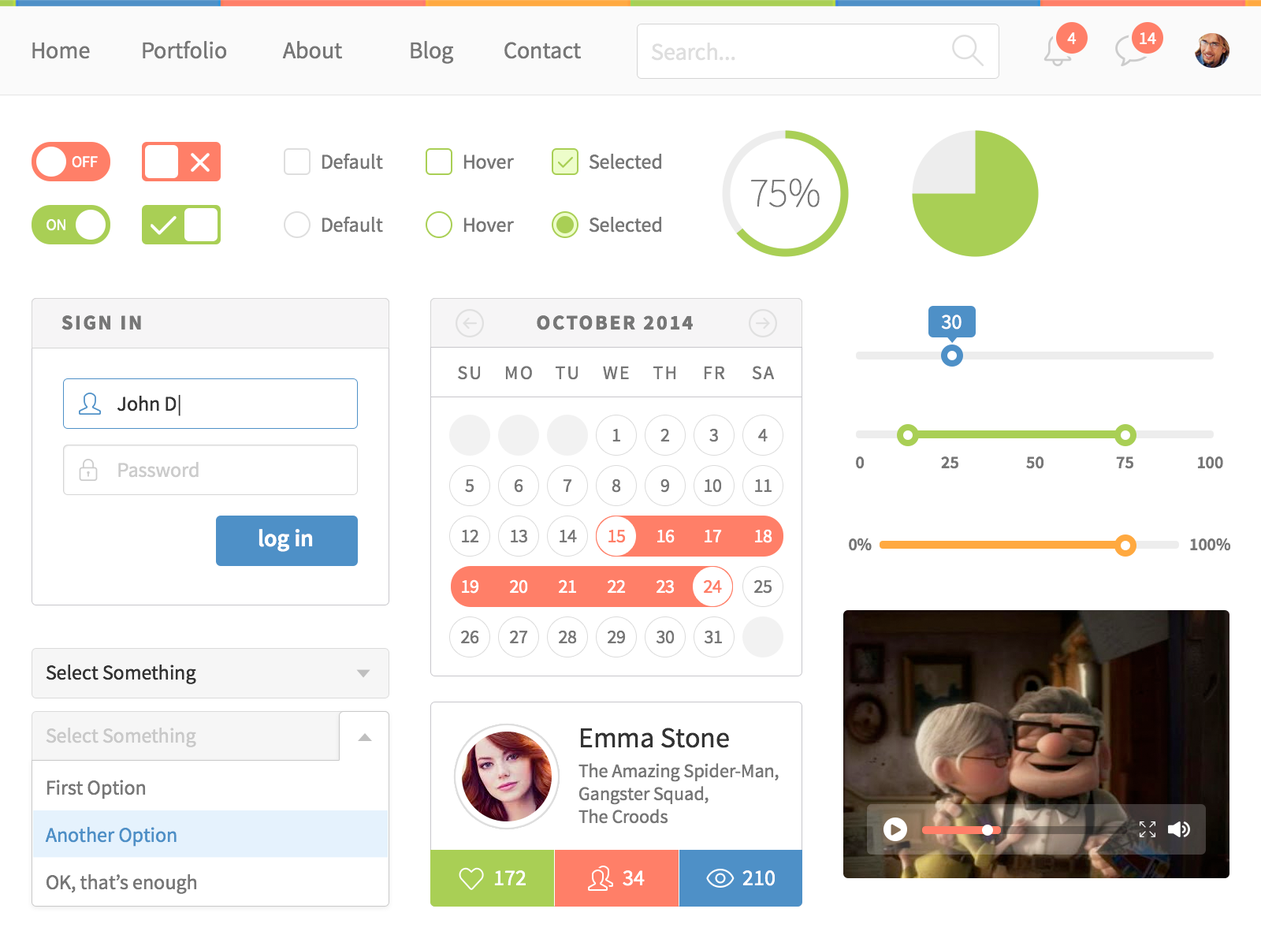
<style>
.page{position:relative;width:1261px;height:946px;background:#ffffff}
.page>*{position:absolute;margin:0}
.t1{font:23.6px "SourceSansPro-Regular";color:#777777}
.t2{font:17.3px "SourceSansPro-Regular";color:#ffffff}
.t3{font:23.6px "SourceSansPro-Regular";color:#dedede}
.t4{font:15.8px "SourceSansPro-Regular";color:#ffffff}
.t5{font:20.5px "SourceSansPro-Regular";color:#777777}
.t6{font:41px "SourceSansPro-ExtraLight";color:#777777}
.t7{font:20.5px "SourceSansPro-Bold";letter-spacing:0.1em;color:#777777;text-transform:uppercase}
.t8{font:20.5px "SourceSansPro-Regular";color:#ffffff;text-transform:uppercase}
.t9{font:18.9px "SourceSansPro-Regular";letter-spacing:0.1em;color:#777777}
.t10{font:20.5px "SourceSansPro-Regular";color:#333333}
.t11{font:18.9px "SourceSansPro-Regular";color:#777777}
.t12{font:20.5px "SourceSansPro-Regular";color:#cccccc}
.t13{font:17.3px "SourceSansPro-Semibold";color:#777777}
.t14{font:23.6px "SourceSansPro-Semibold";color:#ffffff}
.t15{font:18.9px "SourceSansPro-Regular";color:#ff7f68}
.t16{font:18.9px "SourceSansPro-Regular";color:#ffffff}
.t17{font:20.5px "SourceSansPro-Regular";color:#c9c9c9}
.t18{font:28.4px "SourceSansPro-Regular";color:#333333}
.t19{font:20.5px/47.3px "SourceSansPro-Regular";color:#777777}
.t20{font:20.5px/47.3px "SourceSansPro-Regular";color:#4e90c7}
.t21{font:22.1px "SourceSansPro-Regular";color:#ffffff}
</style>
<div class="page">
<p class="t1" style="left:32px;top:42px;width:58px;height:17px">Home</p>
<p class="t1" style="left:143px;top:40px;width:84px;height:19px">Portfolio</p>
<p class="t1" style="left:282px;top:41px;width:61px;height:18px">About</p>
<p class="t1" style="left:411px;top:41px;width:43px;height:23px">Blog</p>
<p class="t1" style="left:504px;top:42px;width:78px;height:17px">Contact</p>
<p class="t2" style="left:1067px;top:32px;width:10px;height:12px">4</p>
<p class="t2" style="left:1140px;top:32px;width:16px;height:12px">14</p>
<p class="t3" style="left:651px;top:43px;width:84px;height:18px">Search...</p>
<p class="t4" style="left:72px;top:156px;width:26px;height:12px">OFF</p>
<p class="t5" style="left:322px;top:153px;width:61px;height:16px">Default</p>
<p class="t5" style="left:463px;top:154px;width:51px;height:15px">Hover</p>
<p class="t5" style="left:589px;top:153px;width:73px;height:16px">Selected</p>
<p class="t6" style="left:750px;top:178px;width:70px;height:29px">75%</p>
<p class="t4" style="left:46px;top:219px;width:19px;height:12px">ON</p>
<p class="t5" style="left:322px;top:216px;width:61px;height:16px">Default</p>
<p class="t5" style="left:463px;top:218px;width:51px;height:14px">Hover</p>
<p class="t5" style="left:589px;top:216px;width:73px;height:16px">Selected</p>
<p class="t7" style="left:61px;top:315px;width:80px;height:15px">Sign in</p>
<p class="t7" style="left:537px;top:315px;width:156px;height:15px">october 2014</p>
<p class="t8" style="left:941px;top:314px;width:20px;height:15px">30</p>
<p class="t9" style="left:458px;top:366px;width:23px;height:14px">SU</p>
<p class="t9" style="left:505px;top:366px;width:27px;height:14px">MO</p>
<p class="t9" style="left:555px;top:366px;width:23px;height:14px">TU</p>
<p class="t9" style="left:603px;top:366px;width:26px;height:13px">WE</p>
<p class="t9" style="left:653px;top:366px;width:23px;height:13px">TH</p>
<p class="t9" style="left:704px;top:366px;width:21px;height:13px">FR</p>
<p class="t9" style="left:752px;top:366px;width:23px;height:14px">SA</p>
<p class="t10" style="left:117px;top:394px;width:63px;height:22px">John D|</p>
<p class="t11" style="left:612px;top:429px;width:8px;height:12px">1</p>
<p class="t11" style="left:660px;top:428px;width:10px;height:13px">2</p>
<p class="t11" style="left:709px;top:428px;width:9px;height:14px">3</p>
<p class="t11" style="left:758px;top:429px;width:10px;height:12px">4</p>
<p class="t12" style="left:118px;top:461px;width:81px;height:17px">Password</p>
<p class="t13" style="left:856px;top:456px;width:9px;height:13px">0</p>
<p class="t13" style="left:941px;top:456px;width:17px;height:13px">25</p>
<p class="t13" style="left:1026px;top:456px;width:18px;height:13px">50</p>
<p class="t13" style="left:1116px;top:456px;width:17px;height:13px">75</p>
<p class="t13" style="left:1197px;top:456px;width:26px;height:13px">100</p>
<p class="t11" style="left:465px;top:479px;width:9px;height:14px">5</p>
<p class="t11" style="left:514px;top:478px;width:9px;height:15px">6</p>
<p class="t11" style="left:563px;top:479px;width:9px;height:13px">7</p>
<p class="t11" style="left:612px;top:478px;width:9px;height:15px">8</p>
<p class="t11" style="left:660px;top:478px;width:10px;height:15px">9</p>
<p class="t11" style="left:705px;top:478px;width:17px;height:15px">10</p>
<p class="t11" style="left:755px;top:479px;width:17px;height:13px">11</p>
<p class="t14" style="left:258px;top:529px;width:55px;height:23px">log in</p>
<p class="t11" style="left:462px;top:529px;width:17px;height:13px">12</p>
<p class="t11" style="left:511px;top:529px;width:16px;height:14px">13</p>
<p class="t11" style="left:560px;top:530px;width:17px;height:12px">14</p>
<p class="t15" style="left:608px;top:530px;width:18px;height:13px">15</p>
<p class="t16" style="left:657px;top:529px;width:18px;height:14px">16</p>
<p class="t16" style="left:705px;top:530px;width:17px;height:12px">17</p>
<p class="t16" style="left:755px;top:529px;width:17px;height:14px">18</p>
<p class="t13" style="left:849px;top:537px;width:23px;height:14px">0%</p>
<p class="t13" style="left:1190px;top:537px;width:41px;height:14px">100%</p>
<p class="t16" style="left:462px;top:579px;width:17px;height:14px">19</p>
<p class="t16" style="left:510px;top:579px;width:18px;height:14px">20</p>
<p class="t16" style="left:559px;top:579px;width:17px;height:14px">21</p>
<p class="t16" style="left:608px;top:579px;width:18px;height:14px">22</p>
<p class="t16" style="left:656px;top:579px;width:18px;height:14px">23</p>
<p class="t15" style="left:704px;top:579px;width:18px;height:14px">24</p>
<p class="t11" style="left:754px;top:579px;width:18px;height:14px">25</p>
<p class="t11" style="left:461px;top:630px;width:18px;height:14px">26</p>
<p class="t11" style="left:510px;top:630px;width:18px;height:13px">27</p>
<p class="t11" style="left:559px;top:630px;width:18px;height:14px">28</p>
<p class="t11" style="left:608px;top:630px;width:18px;height:14px">29</p>
<p class="t11" style="left:656px;top:630px;width:19px;height:14px">30</p>
<p class="t11" style="left:704px;top:630px;width:18px;height:14px">31</p>
<p class="t10" style="left:46px;top:664px;width:150px;height:20px">Select Something</p>
<p class="t17" style="left:46px;top:727px;width:150px;height:20px">Select Something</p>
<p class="t11" style="left:578px;top:727px;width:201px;height:97px"><span class="t18">Emma Stone<br><br></span>The Amazing Spider-Man,<br>Gangster Squad,<br>The Croods</p>
<p class="t19" style="left:45px;top:779px;width:152px;height:115px">First Option<br><span class="t20">Another Option<br></span>OK, that’s enough</p>
<p class="t21" style="left:494px;top:870px;width:32px;height:15px">172</p>
<p class="t21" style="left:623px;top:870px;width:22px;height:16px">34</p>
<p class="t21" style="left:742px;top:870px;width:33px;height:16px">210</p>
</div>
